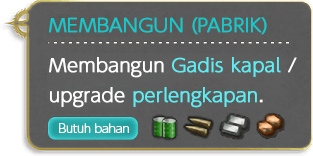
<style>
.page{position:relative;width:313px;height:156px}
.page>*{position:absolute;margin:0}
.t1{font:18px/40px "UDShinGoPro-Light";color:#14c9cb;font-weight:bold}
.t2{font:18px/40px "UDShinGoPro-Light";color:#ffffff;font-weight:bold}
.t3{font:18px/40px "UDShinGoPro-Light";color:#5eedf3;font-weight:bold}
.t4{font:18px/30px "UDShinGoPro-Light";color:#ffffff;font-weight:bold}
.t5{font:18px/30px "UDShinGoPro-Light";color:#5eedf3;font-weight:bold}
.t6{font:12px "UDShinGoPro-Light";letter-spacing:-0.04em;color:#ffffff}
</style>
<div class="page">
<p class="t1" style="left:49px;top:17px;width:248px;height:91px">MEMBANGUN (PABRIK)<br><span class="t2">Membangun </span><span class="t3">Gadis kapal </span><span class="t2">/<br></span><span class="t4">upgrade </span><span class="t5">perlengkapan</span><span class="t4">.</span></p>
<p class="t6" style="left:59px;top:123px;width:70px;height:10px">Butuh bahan</p>
</div>
